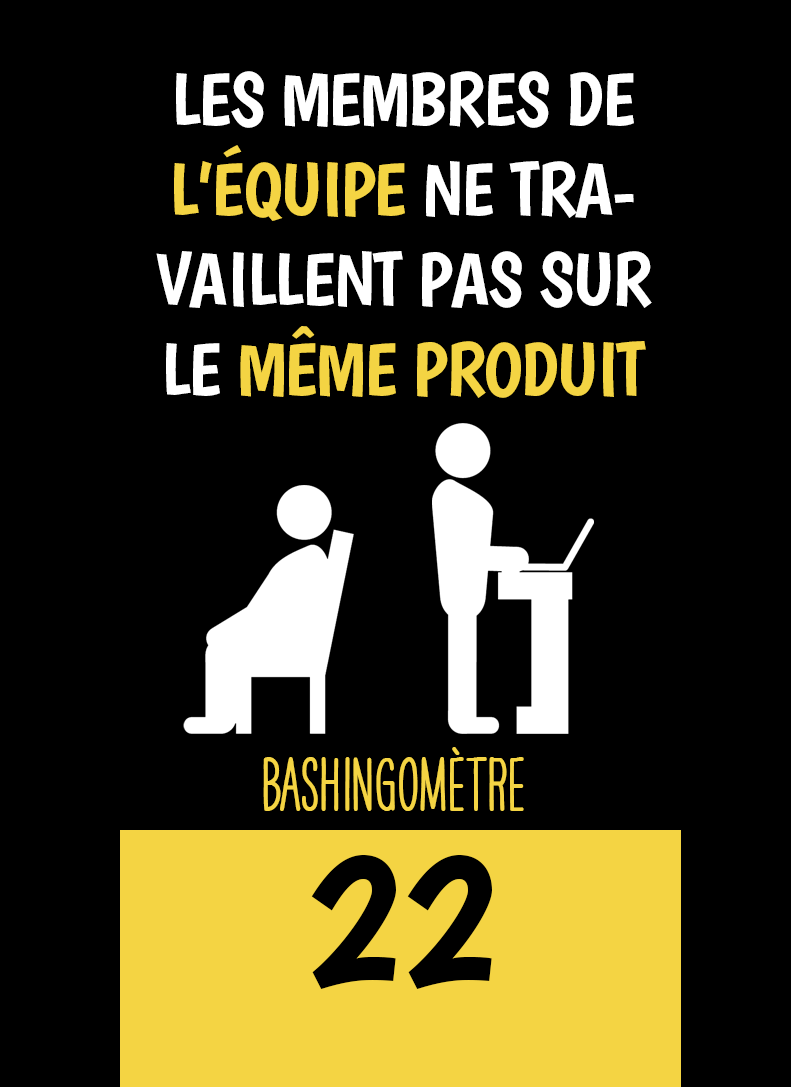
<style>
.page{position:relative;width:791px;height:1087px;background:#000000}
.page>*{position:absolute;margin:0}
.t1{font:75px "Boogaloo-Regular";letter-spacing:-0.02em;color:#ffffff}
.t2{font:75px "Boogaloo-Regular";letter-spacing:-0.02em;color:#f4d443}
.t3{font:66.7px "HAVEANICEDAYTallW04-Bold";color:#f4d443}
.t4{font:200px "Boogaloo-Regular";color:#000000}
</style>
<div class="page">
<p class="t1" style="left:156px;top:71px;width:496px;height:327px;text-align:center">LES MEMBRES DE <span class="t2">L’ÉQUIPE</span> NE TRAVAILLENT PAS SUR LE <span class="t2">MÊME PRODUIT</span></p>
<p class="t3" style="left:263px;top:747px;width:261px;height:64px">BASHINgomètre</p>
<p class="t4" style="left:311px;top:855px;width:181px;height:134px">22</p>
</div>
